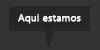
<style>
.page{position:relative;width:100px;height:50px;background:#333333}
.page>*{position:absolute;margin:0}
.t1{font:10px "SegoeUI";color:#ffffff;font-weight:bold}
</style>
<div class="page">
<p class="t1" style="left:18px;top:14px;width:63px;height:10px">Aqui estamos</p>
</div>
